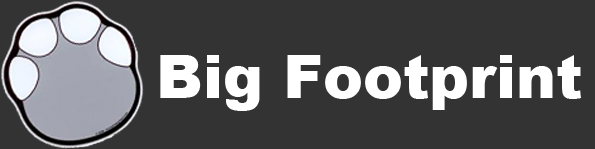
<style>
.page{position:relative;width:595px;height:149px;background:#333333}
.page>*{position:absolute;margin:0}
.t1{font:60px "Arial-Black";color:#ffffff}
</style>
<div class="page">
<p class="t1" style="left:160px;top:55px;width:421px;height:56px">Big Footprint</p>
</div>
